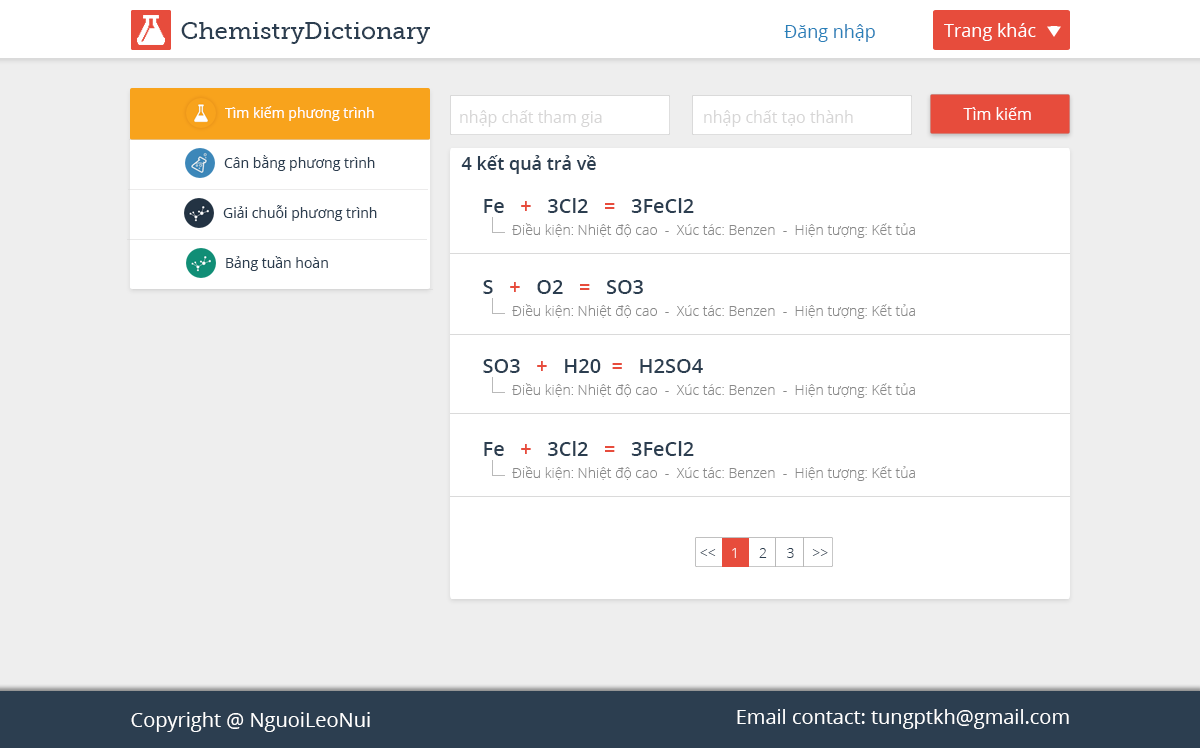
<style>
.page{position:relative;width:1200px;height:748px;background:#ffffff}
.page>*{position:absolute;margin:0}
.t1{font:24px "VNF-MuseoBook";color:#2c3e50}
.t2{font:18px "OpenSans";color:#2980b9}
.t3{font:18px "OpenSans";color:#ffffff}
.t4{font:14px "OpenSans";color:#ffffff}
.t5{font:16px "OpenSans";color:#d6d5d5}
.t6{font:16px "OpenSans";color:#ffffff}
.t7{font:14px "OpenSans";color:#2c3e50}
.t8{font:18px "OpenSans-Semibold";color:#2c3e50}
.t9{font:20px "OpenSans-Semibold";color:#2c3e50}
.t10{font:20px "OpenSans-Semibold";color:#e74c3c}
.t11{font:14px "OpenSans-Light";color:#898989}
.t12{font:14px "OpenSans-Light"}
.t13{font:14px "OpenSans-Light";color:#2c3e50}
.t14{font:20px "OpenSans";color:#ffffff}
</style>
<div class="page">
<p class="t1" style="left:181px;top:22px;width:249px;height:22px">ChemistryDictionary</p>
<p class="t2" style="left:784px;top:24px;width:91px;height:18px">Đăng nhập</p>
<p class="t3" style="left:944px;top:23px;width:92px;height:18px">Trang khác</p>
<p class="t4" style="left:225px;top:106px;width:149px;height:15px">Tìm kiếm phương trình</p>
<p class="t5" style="left:460px;top:110px;width:142px;height:17px">nhập chất tham gia</p>
<p class="t5" style="left:704px;top:110px;width:149px;height:17px">nhập chất tạo thành</p>
<p class="t6" style="left:963px;top:107px;width:68px;height:13px">Tìm kiếm</p>
<p class="t7" style="left:224px;top:155px;width:151px;height:16px">Cân bằng phương trình</p>
<p class="t8" style="left:461px;top:155px;width:135px;height:19px">4 kết quả trả về</p>
<p class="t9" style="left:484px;top:198px;width:210px;height:15px">Fe   <span class="t10">+</span>   3Cl2   <span class="t10">=   </span>3FeCl2</p>
<p class="t7" style="left:223px;top:205px;width:154px;height:16px">Giải chuỗi phương trình</p>
<p class="t11" style="left:512px;top:223px;width:403px;height:15px">Điều kiện: Nhiệt độ cao  -  Xúc tác: Benzen  -  Hiện tượng: Kết tủa</p>
<p class="t7" style="left:226px;top:256px;width:102px;height:15px">Bảng tuần hoàn</p>
<p class="t9" style="left:483px;top:280px;width:160px;height:14px">S   <span class="t10">+</span>   O2   <span class="t10">=   </span>SO3</p>
<p class="t11" style="left:512px;top:304px;width:403px;height:15px">Điều kiện: Nhiệt độ cao  -  Xúc tác: Benzen  -  Hiện tượng: Kết tủa</p>
<p class="t9" style="left:483px;top:359px;width:220px;height:14px">SO3   <span class="t10">+</span>   H20  <span class="t10">=   </span>H2SO4</p>
<p class="t11" style="left:512px;top:383px;width:403px;height:15px">Điều kiện: Nhiệt độ cao  -  Xúc tác: Benzen  -  Hiện tượng: Kết tủa</p>
<p class="t9" style="left:484px;top:441px;width:210px;height:15px">Fe   <span class="t10">+</span>   3Cl2   <span class="t10">=   </span>3FeCl2</p>
<p class="t11" style="left:512px;top:466px;width:403px;height:15px">Điều kiện: Nhiệt độ cao  -  Xúc tác: Benzen  -  Hiện tượng: Kết tủa</p>
<p class="t12" style="left:700px;top:549px;width:16px;height:7px">&lt;&lt;</p>
<p class="t12" style="left:732px;top:548px;width:4px;height:10px">1</p>
<p class="t13" style="left:759px;top:548px;width:8px;height:10px">2</p>
<p class="t13" style="left:787px;top:548px;width:7px;height:10px">3</p>
<p class="t12" style="left:812px;top:549px;width:16px;height:7px">&gt;&gt;</p>
<p class="t14" style="left:131px;top:712px;width:239px;height:20px">Copyright @ NguoiLeoNui</p>
<p class="t14" style="left:737px;top:709px;width:332px;height:20px">Email contact: tungptkh@gmail.com</p>
</div>
